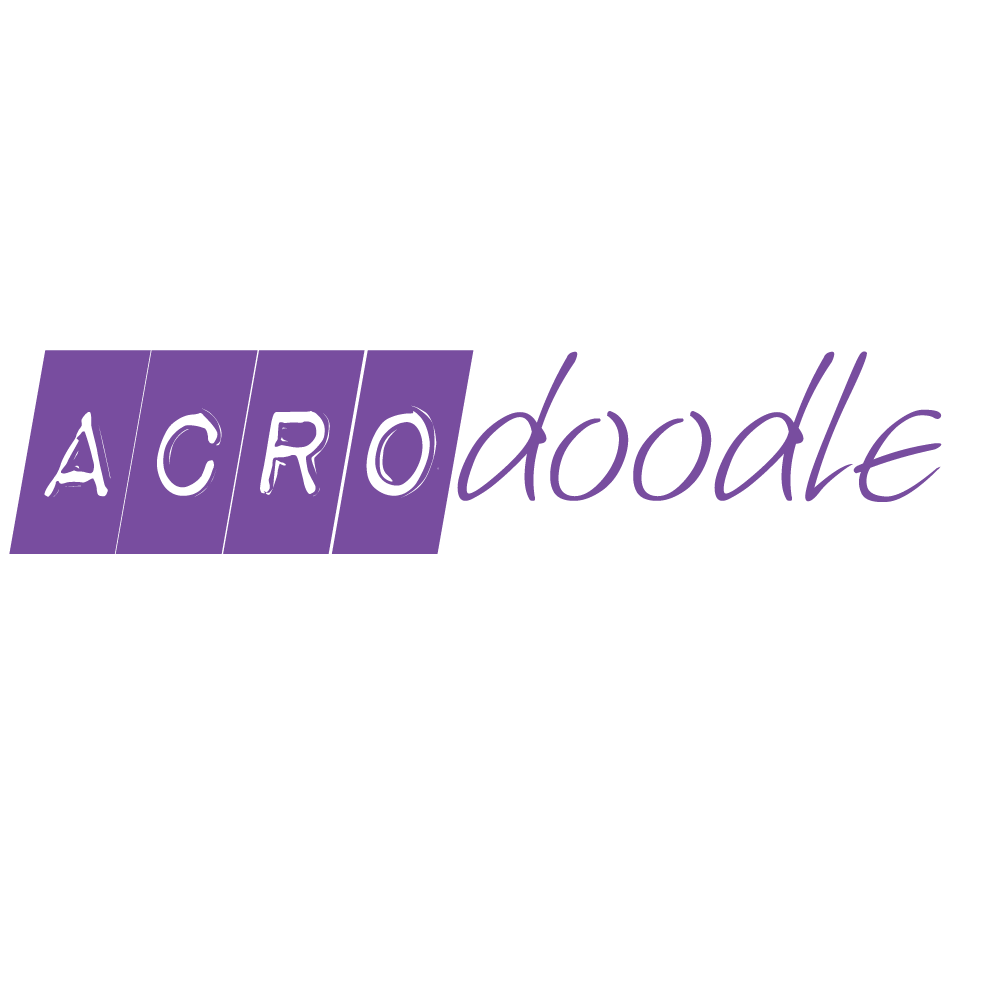
<style>
.page{position:relative;width:1000px;height:1000px;background:#ffffff}
.page>*{position:absolute;margin:0}
.t1{font:125px "Kingthings-Wrote";letter-spacing:0.05em;color:#784d9f;font-style:italic}
.t2{font:166.7px "ImpactLabel";letter-spacing:0.05em;color:#784d9f;font-style:italic}
</style>
<div class="page">
<p class="t1" style="left:9px;top:350px;width:933px;height:204px"><span class="t2">ACRO</span>doodle</p>
</div>
